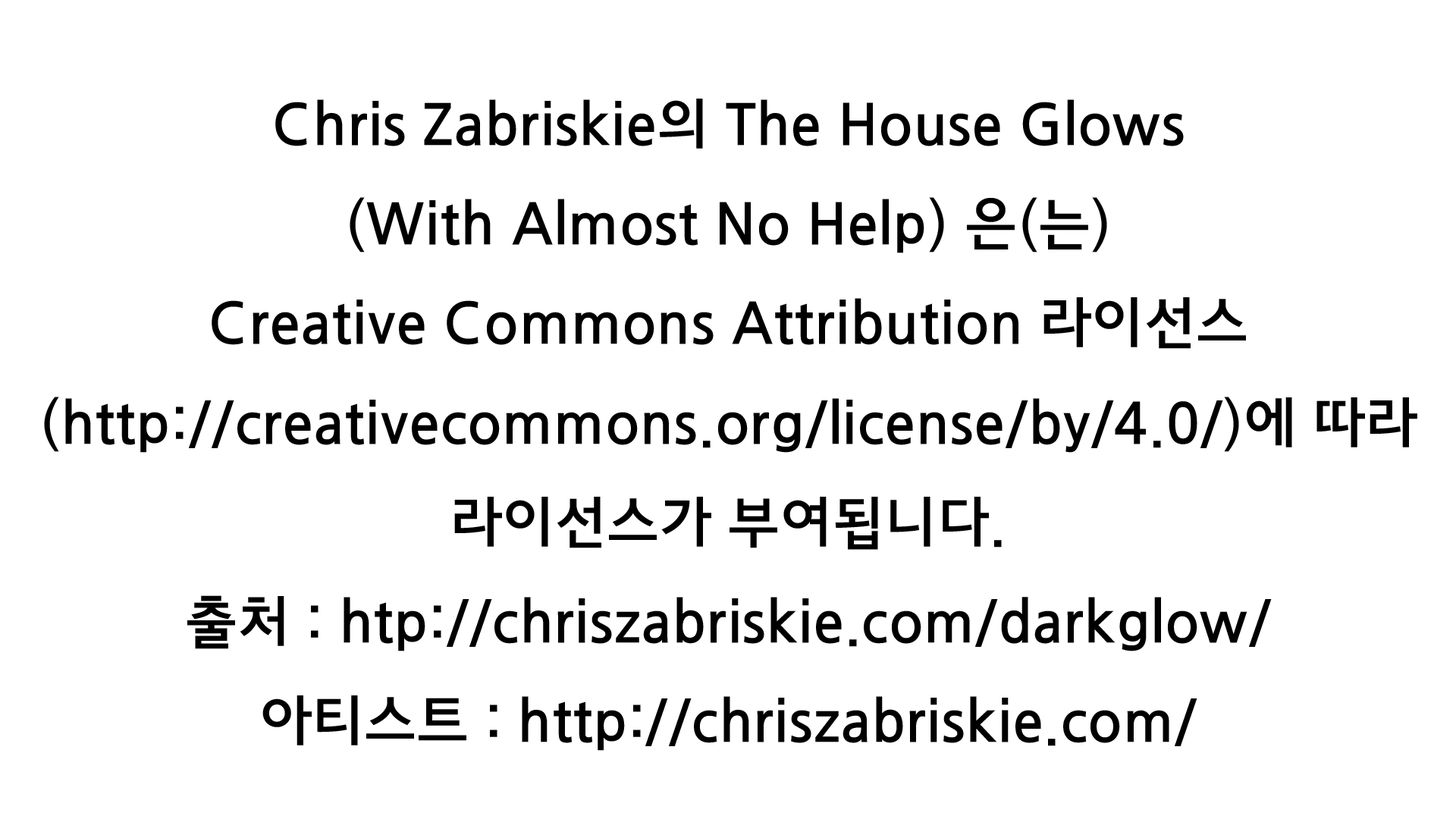
<style>
.page{position:relative;width:1456px;height:819px;background:#ffffff}
.page>*{position:absolute;margin:0}
.t1{font:56.9px "JejuGothic";color:#000000}
</style>
<div class="page">
<p class="t1" style="left:44px;top:99px;width:1373px;height:652px;text-align:center">Chris Zabriskie의 The House Glows<br>(With Almost No Help) 은(는)<br>Creative Commons Attribution 라이선스<br>(http://creativecommons.org/license/by/4.0/)에 따라 라이선스가 부여됩니다.<br>출처 : htp://chriszabriskie.com/darkglow/<br>아티스트 : http://chriszabriskie.com/</p>
</div>
